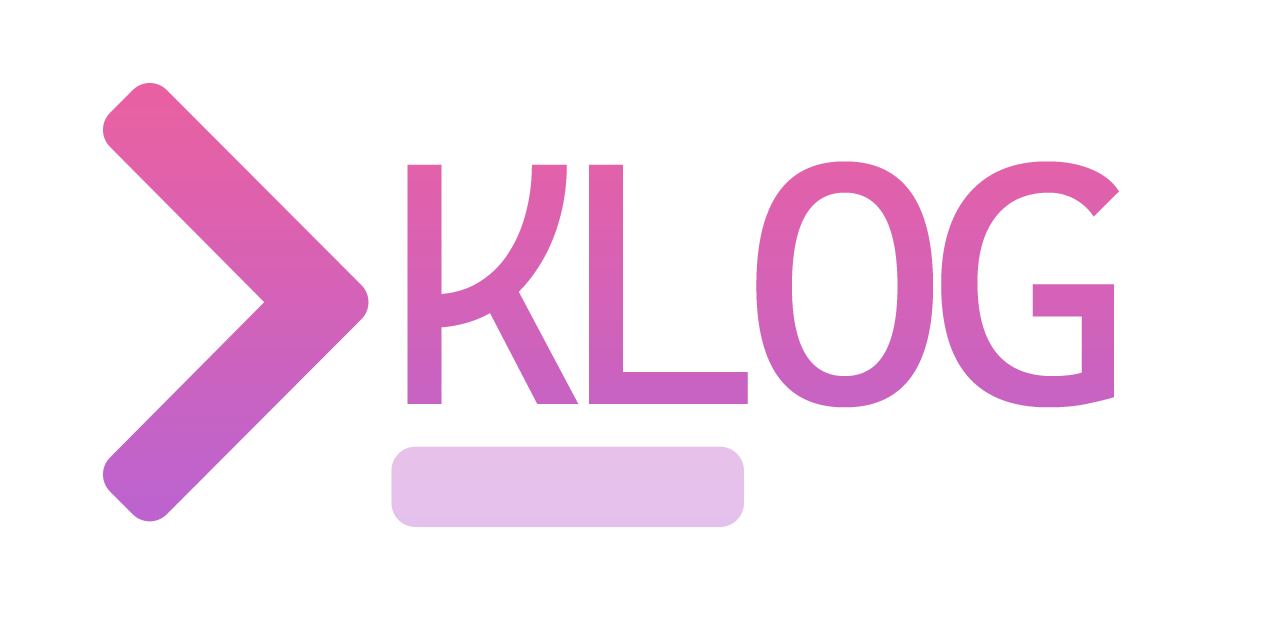
<style>
.page{position:relative;width:1280px;height:640px;background:#ffffff}
.page>*{position:absolute;margin:0}
.t1{font:345px "CascadiaCode-Regular";letter-spacing:-0.06em;color:#d462b8}
</style>
<div class="page">
<p class="t1" style="left:407px;top:161px;width:712px;height:247px">KLOG</p>
</div>
